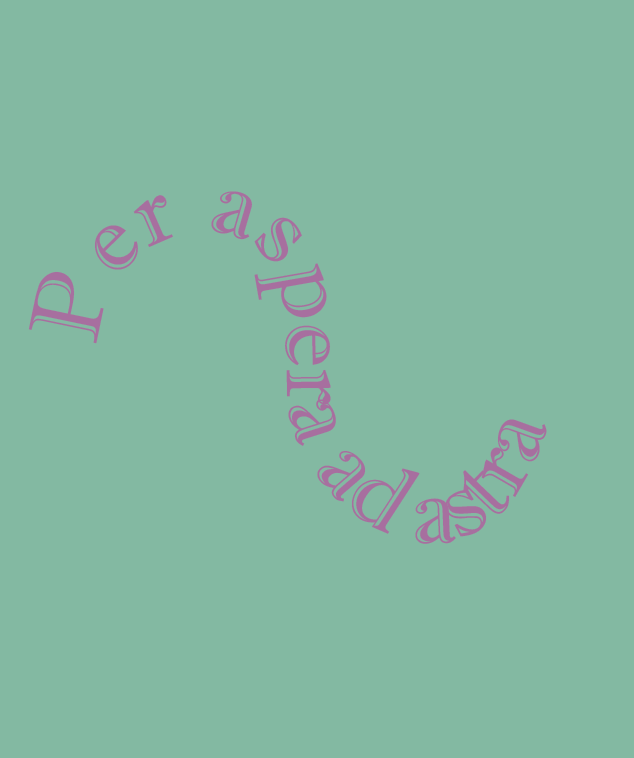
<style>
.page{position:relative;width:634px;height:758px;background:#83b9a2}
.page>*{position:absolute;margin:0}
.t1{font:100px "ImprintMT-Shadow";color:#a76f9f}
</style>
<div class="page">
<p class="t1" style="left:28px;top:191px;width:519px;height:353px;text-align:center">Per aspera ad astra</p>
</div>
